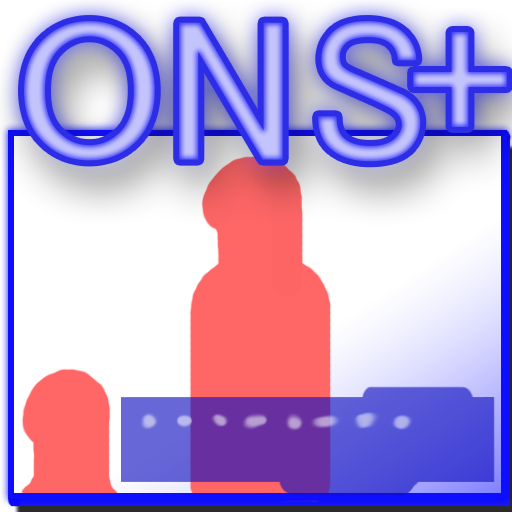
<style>
.page{position:relative;width:512px;height:512px}
.page>*{position:absolute;margin:0}
.t1{font:204.8px "MS-UIGothic";letter-spacing:0.042em;scale:1.09 1}
.t2{font:204.8px "MS-UIGothic";letter-spacing:0.042em}
.t3{font:200px "Consolas";letter-spacing:0.042em}
</style>
<div class="page">
<p class="t1" style="left:24px;top:21px;width:131px;height:140px">O</p>
<p class="t2" style="left:179px;top:21px;width:242px;height:141px">NS</p>
<p class="t3" style="left:413px;top:32px;width:94px;height:95px">+</p>
</div>
